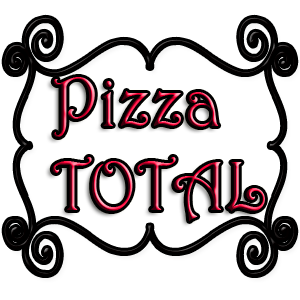
<style>
.page{position:relative;width:300px;height:300px;background:#ffffff}
.page>*{position:absolute;margin:0}
.t1{font:70px "Harrington"}
</style>
<div class="page">
<p class="t1" style="left:52px;top:77px;width:213px;height:144px">Pizza<br>TOTAL</p>
</div>
